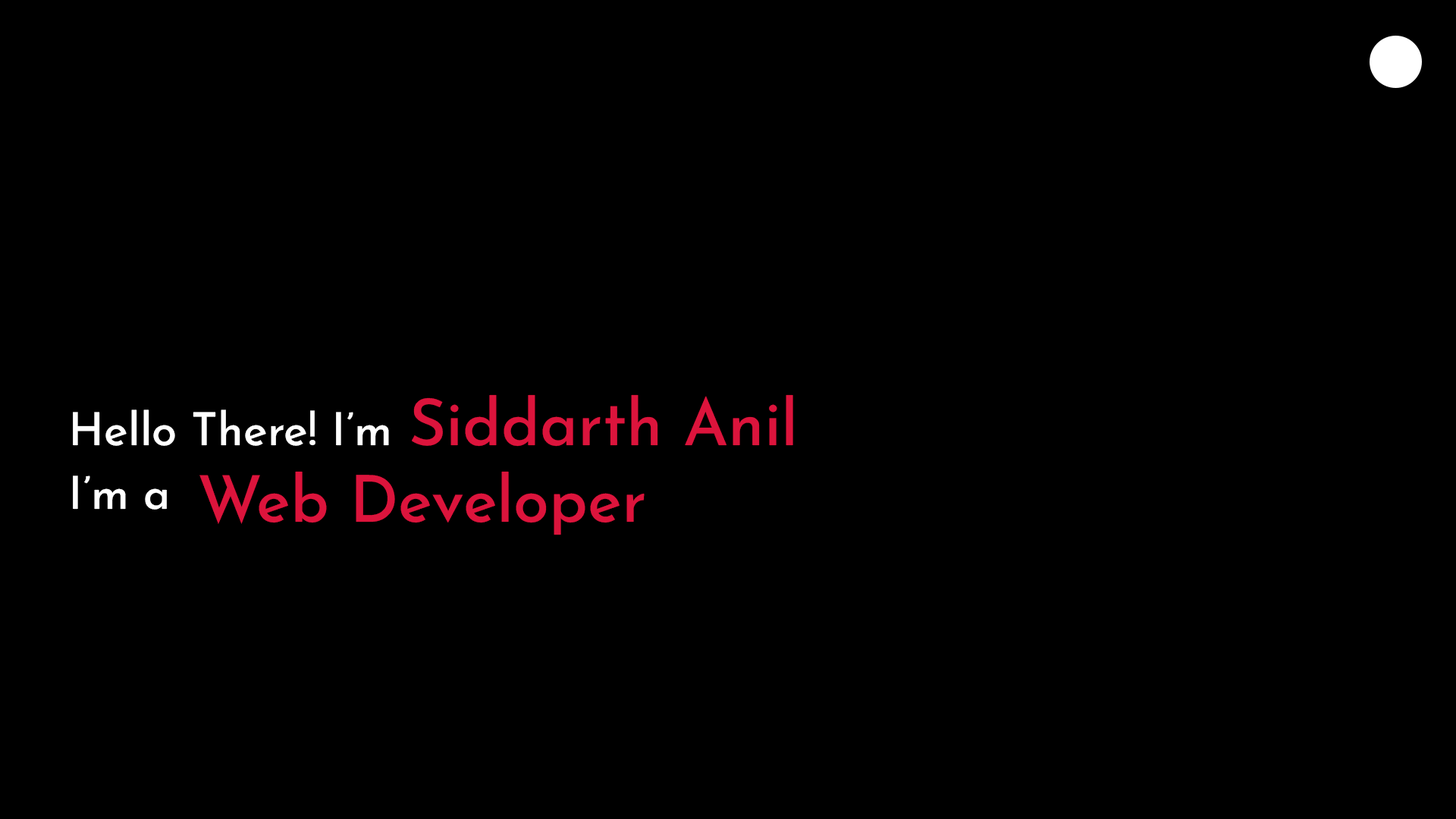
<style>
.page{position:relative;width:1456px;height:819px;background:#000000}
.page>*{position:absolute;margin:0}
.t1{font:64.5px "JosefinSansRoman-Medium";color:#dc143c}
.t2{font:45.5px "JosefinSansRoman-Medium";color:#ffffff}
</style>
<div class="page">
<p class="t1" style="left:412px;top:394px;width:381px;height:53px">Siddarth Anil</p>
<p class="t2" style="left:73px;top:409px;width:316px;height:37px">Hello There! I’m</p>
<p class="t1" style="left:199px;top:471px;width:446px;height:64px">Web Developer</p>
<p class="t2" style="left:73px;top:475px;width:94px;height:35px">I’m a</p>
</div>
